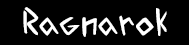
<style>
.page{position:relative;width:189px;height:45px;background:#000000}
.page>*{position:absolute;margin:0}
.t1{font:34.9px "AcadianRunes-Regular";color:#ffffff}
</style>
<div class="page">
<p class="t1" style="left:23px;top:7px;width:144px;height:30px">Ragnarok</p>
</div>
